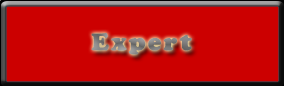
<style>
.page{position:relative;width:284px;height:86px;background:#cc0000}
.page>*{position:absolute;margin:0}
.t1{font:23.6px "CooperBlackStd";letter-spacing:0.1em;color:#818181}
</style>
<div class="page">
<p class="t1" style="left:91px;top:33px;width:101px;height:22px">Expert</p>
</div>
